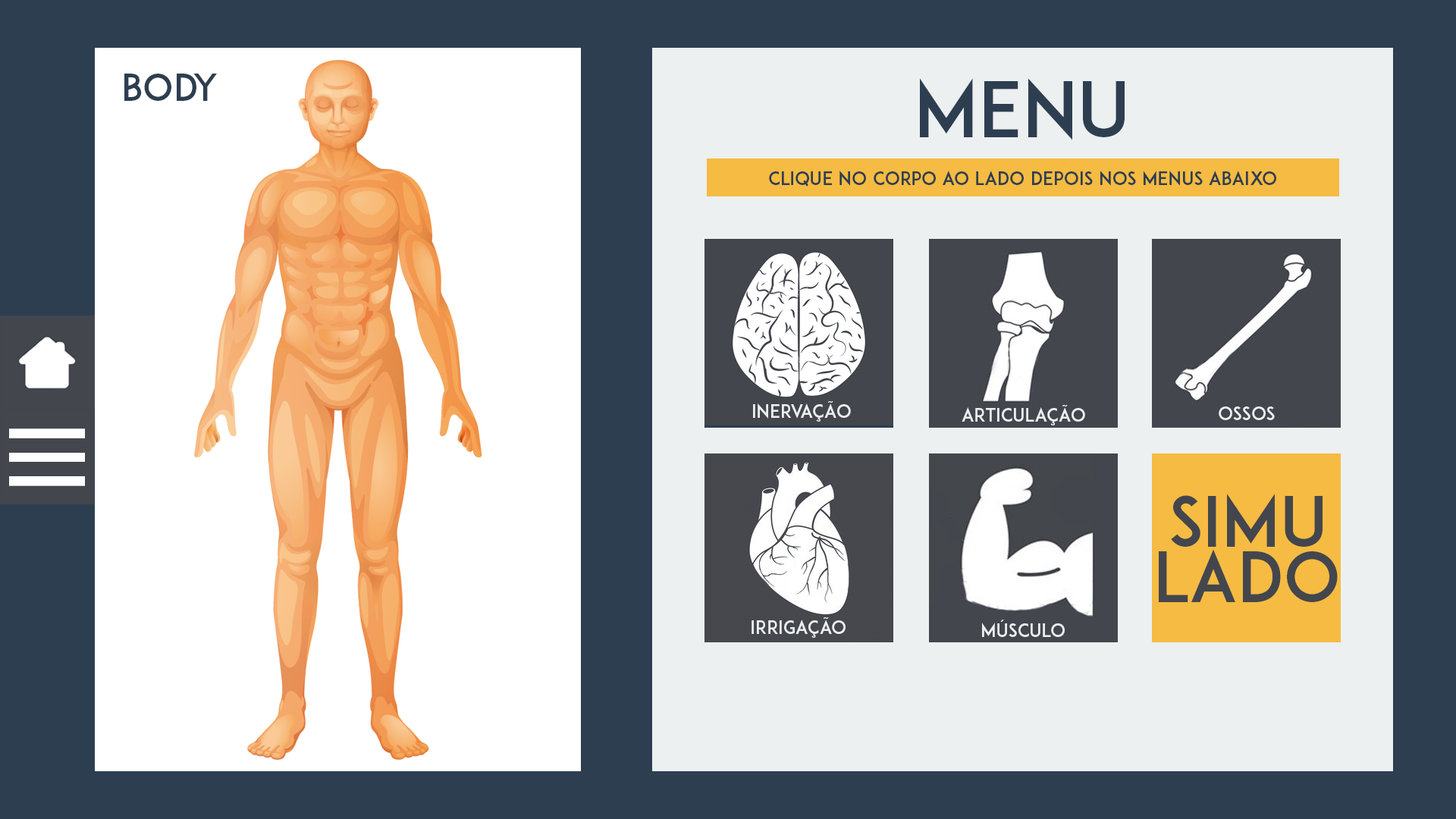
<style>
.page{position:relative;width:1456px;height:819px;background:#2d3e50}
.page>*{position:absolute;margin:0}
.t1{font:36.4px "ADAM.CGPRO";color:#2d3e50}
.t2{font:75.8px "ADAM.CGPRO";color:#2d3e50}
.t3{font:18.2px "ADAM.CGPRO";color:#2d3e50}
.t4{font:18.2px "ADAM.CGPRO";color:#ecf0f1}
.t5{font:68.2px/55.4px "ADAM.CGPRO";color:#43464d}
</style>
<div class="page">
<p class="t1" style="left:124px;top:74px;width:93px;height:27px">Body</p>
<p class="t2" style="left:920px;top:78px;width:205px;height:62px">MENU</p>
<p class="t3" style="left:769px;top:171px;width:507px;height:16px">cLIQUE NO CORPO AO LADO DEPOIS NOS MENUS ABAIXO</p>
<p class="t4" style="left:753px;top:401px;width:98px;height:21px">inervação</p>
<p class="t4" style="left:962px;top:405px;width:123px;height:20px">articulação</p>
<p class="t4" style="left:1219px;top:406px;width:56px;height:14px">ossos</p>
<p class="t5" style="left:1159px;top:494px;width:179px;height:108px;text-align:center">SIMU<br>LADO</p>
<p class="t4" style="left:751px;top:617px;width:95px;height:21px">IRRIGAÇÃO</p>
<p class="t4" style="left:982px;top:620px;width:83px;height:17px">MÚSCULO</p>
</div>
